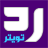
<style>
.page{position:relative;width:48px;height:48px;background:#4d0076}
.page>*{position:absolute;margin:0}
.t1{font:64px "HacenPromoter";letter-spacing:-0.02em;color:#ffffff}
.t2{font:11px "HacenPromoter";letter-spacing:-0.02em;color:#33ccff}
</style>
<div class="page">
<p class="t1" style="left:3px;top:7px;width:41px;height:35px">رد</p>
<p class="t2" style="left:3px;top:34px;width:22px;height:9px">تويتر</p>
</div>
